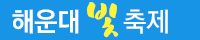
<style>
.page{position:relative;width:200px;height:40px;background:#1894e7}
.page>*{position:absolute;margin:0}
.t1{font:49.2px "KoreanBBNNB-B";letter-spacing:-0.025em;color:#fff335}
.t2{font:26.7px "KoreanGD16-R";letter-spacing:-0.025em;color:#ffffff}
.t3{font:26.7px "KoreanGD14-R";letter-spacing:-0.025em;color:#ffffff}
</style>
<div class="page">
<p class="t1" style="left:87px;top:2px;width:32px;height:36px">빛</p>
<p class="t2" style="left:12px;top:9px;width:67px;height:25px">해운대</p>
<p class="t3" style="left:123px;top:9px;width:45px;height:25px">축제</p>
</div>
